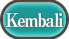
<style>
.page{position:relative;width:69px;height:39px}
.page>*{position:absolute;margin:0}
.t1{font:18px "RyuminPro-ExBold";letter-spacing:-0.08em;color:#fdfbf9;scale:0.92 1}
</style>
<div class="page">
<p class="t1" style="left:6px;top:13px;width:58px;height:14px">Kembali</p>
</div>
